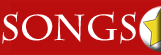
<style>
.page{position:relative;width:161px;height:55px;background:#ba0e0e}
.page>*{position:absolute;margin:0}
.t1{font:36px "CharlemagneStd-Bold";color:#ffffff}
</style>
<div class="page">
<p class="t1" style="left:2px;top:11px;width:134px;height:33px">Songs</p>
</div>
